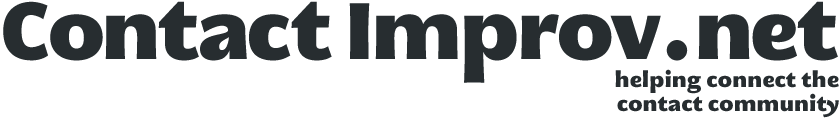
<style>
.page{position:relative;width:840px;height:130px;background:#ffffff}
.page>*{position:absolute;margin:0}
.t1{font:80px "MEgalopolisExtra";color:#272d30}
.t2{font:20px "MEgalopolisExtra";color:#272d30}
</style>
<div class="page">
<p class="t1" style="left:3px;top:1px;width:835px;height:82px">ContactImprov.net</p>
<p class="t2" style="left:615px;top:69px;width:224px;height:49px;text-align:right">helping connect the<br>contact community</p>
</div>
